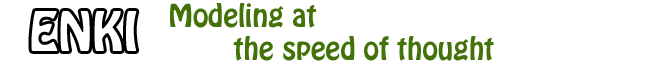
<style>
.page{position:relative;width:666px;height:62px;background:#ffffff}
.page>*{position:absolute;margin:0}
.t1{font:28px "HoboStd";color:#427208}
.t2{font:48px "HoboStd";color:#ffffff}
</style>
<div class="page">
<p class="t1" style="left:170px;top:3px;width:324px;height:58px">Modeling at <br>        the speed of thought</p>
<p class="t2" style="left:31px;top:11px;width:106px;height:40px">ENKI</p>
</div>
